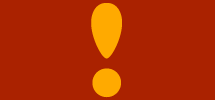
<style>
.page{position:relative;width:215px;height:100px;background:#aa2200}
.page>*{position:absolute;margin:0}
.t1{font:128px "CooperBlackStd";color:#ffaa00}
</style>
<div class="page">
<p class="t1" style="left:91px;top:3px;width:31px;height:95px">!</p>
</div>
